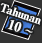
<style>
.page{position:relative;width:42px;height:43px;background:#333333}
.page>*{position:absolute;margin:0}
.t1{font:11px/14px "RyuminPro-ExBold";letter-spacing:-0.08em;color:#ffffff;font-weight:bold}
.t2{font:13px/14px "RyuminPro-ExBold";color:#ffffff;font-weight:bold}
.t3{font:13px/14px "WineArial";color:#ffffff;font-weight:bold}
</style>
<div class="page">
<p class="t1" style="left:0px;top:3px;width:41px;height:30px;text-align:center;rotate:19deg">Tahunan<br><span class="t2">  10 </span><span class="t3">~</span></p>
</div>
